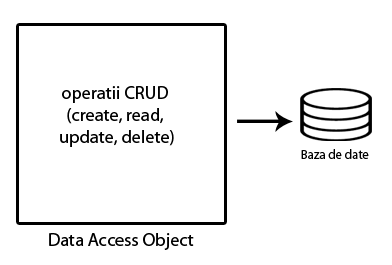
<style>
.page{position:relative;width:392px;height:265px;background:#ffffff}
.page>*{position:absolute;margin:0}
.t1{font:18.3px "MyriadPro-Regular";color:#000000}
.t2{font:12.9px "MyriadPro-Regular";color:#000000}
</style>
<div class="page">
<p class="t1" style="left:60px;top:86px;width:114px;height:61px;text-align:center">operatii CRUD <br>(create, read, <br>update, delete)</p>
<p class="t2" style="left:301px;top:149px;width:68px;height:10px">Baza de date</p>
<p class="t1" style="left:49px;top:233px;width:145px;height:17px">Data Access Object</p>
</div>
